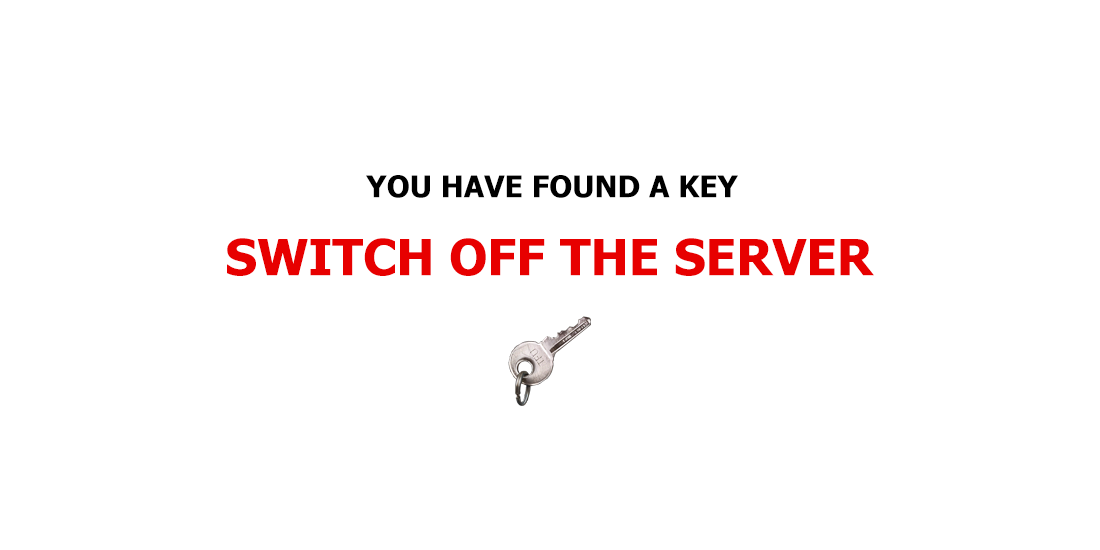
<style>
.page{position:relative;width:1100px;height:550px;background:#ffffff}
.page>*{position:absolute;margin:0}
.t1{font:30px "Tahoma-Bold";color:#000000}
.t2{font:49.9px "Tahoma-Bold";color:#e70000}
</style>
<div class="page">
<p class="t1" style="left:366px;top:175px;width:372px;height:23px">YOU HAVE FOUND A KEY</p>
<p class="t2" style="left:227px;top:238px;width:647px;height:38px">SWITCH OFF THE SERVER</p>
</div>
